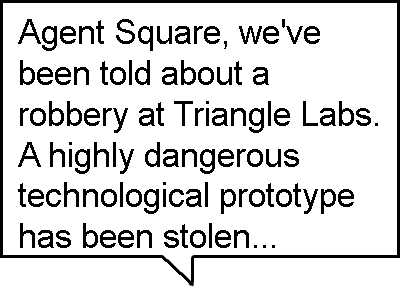
<style>
.page{position:relative;width:400px;height:300px;background:#ffffff}
.page>*{position:absolute;margin:0}
.t1{font:34px "ArialMT";color:#000000}
</style>
<div class="page">
<p class="t1" style="left:18px;top:19px;width:360px;height:229px">Agent Square, we've<br>been told about a<br>robbery at Triangle Labs.<br>A highly dangerous<br>technological prototype<br>has been stolen...</p>
</div>
